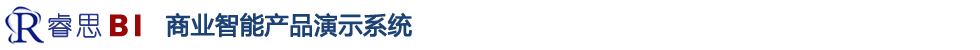
<style>
.page{position:relative;width:980px;height:50px;background:#ffffff}
.page>*{position:absolute;margin:0}
.t1{font:24px "MicrosoftYaHei";color:#1c4275;font-weight:bold}
</style>
<div class="page">
<p class="t1" style="left:166px;top:12px;width:246px;height:26px">商业智能产品演示系统</p>
</div>
